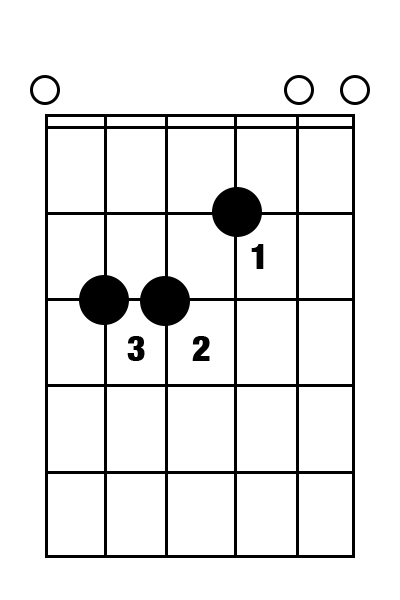
<style>
.page{position:relative;width:400px;height:600px;background:#ffffff}
.page>*{position:absolute;margin:0}
.t1{font:36px "HelveticaNeue-CondensedBlack";color:#000000}
</style>
<div class="page">
<p class="t1" style="left:251px;top:244px;width:13px;height:25px">1</p>
<p class="t1" style="left:127px;top:336px;width:18px;height:25px">3</p>
<p class="t1" style="left:192px;top:336px;width:18px;height:25px">2</p>
</div>
